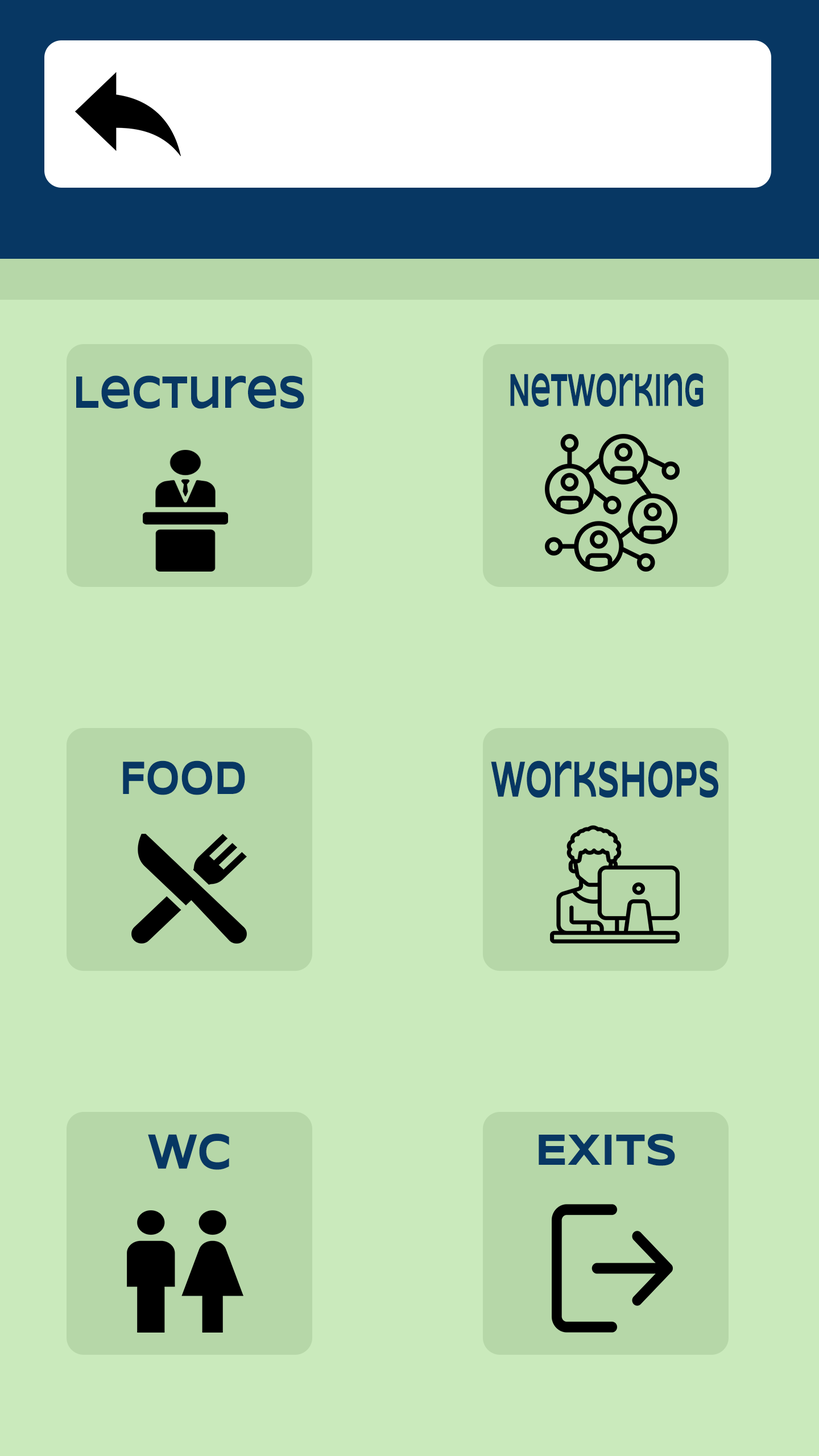
<style>
.page{position:relative;width:819px;height:1456px;background:#caeabc}
.page>*{position:absolute;margin:0}
.t1{font:46.6px "Syncopate-Bold";color:#073763;scale:0.71 1}
.t2{font:47.5px "Syncopate-Bold";color:#073763;scale:0.45 1}
.t3{font:48.1px "Syncopate-Bold";color:#073763;scale:0.69 1}
.t4{font:52px "Syncopate-Bold";color:#073763;scale:0.51 1}
.t5{font:50.9px "Syncopate-Bold";color:#073763;scale:0.74 1}
.t6{font:44.9px "Syncopate-Bold";color:#073763;scale:0.84 1}
</style>
<div class="page">
<p class="t1" style="left:76px;top:375px;width:228px;height:34px">Lectures</p>
<p class="t2" style="left:510px;top:373px;width:194px;height:34px">Networking</p>
<p class="t3" style="left:123px;top:760px;width:122px;height:35px">Food</p>
<p class="t4" style="left:491px;top:760px;width:227px;height:38px">Workshops</p>
<p class="t5" style="left:148px;top:1134px;width:81px;height:36px">WC</p>
<p class="t6" style="left:539px;top:1134px;width:136px;height:32px">Exits</p>
</div>
